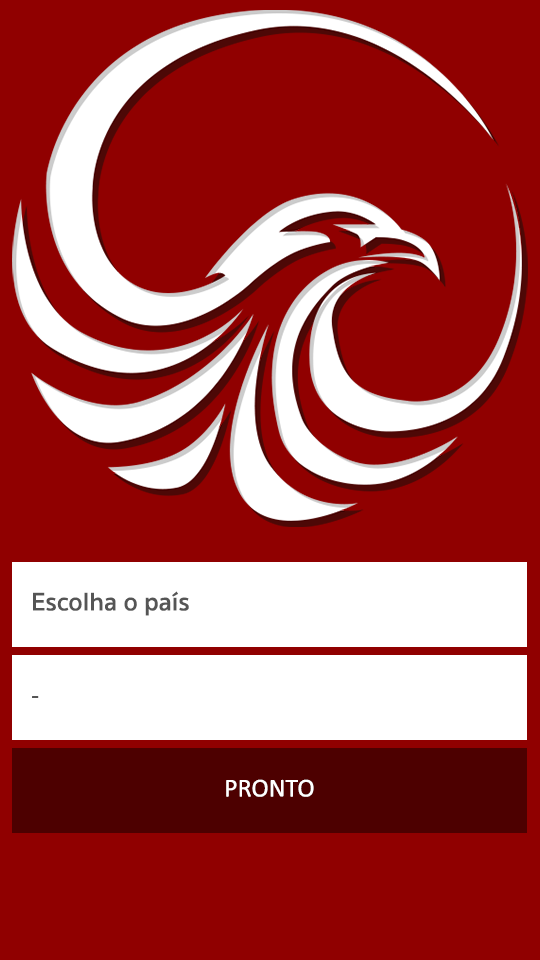
<style>
.page{position:relative;width:540px;height:960px;background:#900000}
.page>*{position:absolute;margin:0}
.t1{font:26px "SukhumvitSet-SemiBold";color:#555555}
.t2{font:26px "Calibri";color:#555555}
.t3{font:26px "Calibri";color:#ffffff}
</style>
<div class="page">
<p class="t1" style="left:33px;top:591px;width:156px;height:25px">Escolha o país</p>
<p class="t2" style="left:32px;top:696px;width:7px;height:2px">-</p>
<p class="t3" style="left:226px;top:779px;width:88px;height:18px">PRONTO</p>
</div>
